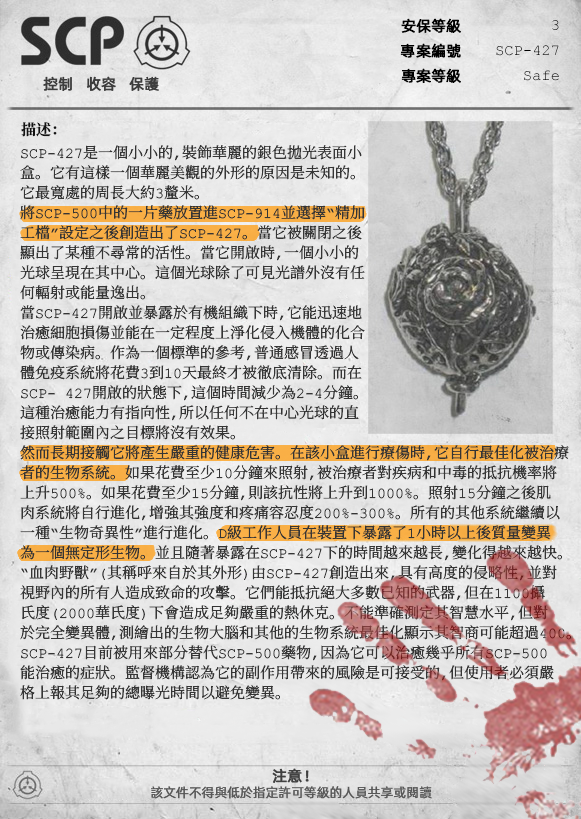
<style>
.page{position:relative;width:581px;height:819px}
.page>*{position:absolute;margin:0}
.t1{font:15px "AlibabaPuHuiTiR";color:#000000;font-weight:bold}
.t2{font:15px "AlibabaPuHuiTiR";color:#3d3d3d;font-weight:bold}
.t3{font:15px "ContainmentBreach-Bold";color:#121212}
.t4{font:15px/20px "ContainmentBreach-Regular";color:#353535}
.t5{font:15px "AlibabaPuHuiTiR";color:#414141;font-weight:bold}
.t6{font:13px "AlibabaPuHuiTiR";color:#575757}
</style>
<div class="page">
<p class="t1" style="left:401px;top:18px;width:60px;height:15px">安保等級</p>
<p class="t1" style="left:400px;top:43px;width:61px;height:15px">專案編號</p>
<p class="t2" style="left:43px;top:76px;width:116px;height:15px">控制   收容   保護</p>
<p class="t1" style="left:401px;top:68px;width:60px;height:15px">專案等級</p>
<p class="t3" style="left:21px;top:122px;width:36px;height:15px">描述：</p>
<p class="t4" style="left:20px;top:145px;width:551px;height:555px">SCP-427是一個小小的，裝飾華麗的銀色拋光表面小<br>盒。它有這樣一個華麗美觀的外形的原因是未知的。<br>它最寬處的周長大約3釐米。<br>將SCP-500中的一片藥放置進SCP-914並選擇“精加<br>工檔”設定之後創造出了SCP-427。當它被關閉之後<br>顯出了某種不尋常的活性。當它開啟時，一個小小的<br>光球呈現在其中心。這個光球除了可見光譜外沒有任<br>何輻射或能量逸出。<br>當SCP-427開啟並暴露於有機組織下時，它能迅速地<br>治癒細胞損傷並能在一定程度上淨化侵入機體的化合<br>物或傳染病。作為一個標準的參考，普通感冒透過人<br>體免疫系統將花費3到10天最終才被徹底清除。而在<br>SCP- 427開啟的狀態下，這個時間減少為2-4分鐘。<br>這種治癒能力有指向性，所以任何不在中心光球的直<br>接照射範圍內之目標將沒有效果。<br>然而長期接觸它將產生嚴重的健康危害。在該小盒進行療傷時，它自行最佳化被治療<br>者的生物系統。如果花費至少10分鐘來照射，被治療者對疾病和中毒的抵抗機率將<br>上升500%。如果花費至少15分鐘，則該抗性將上升到1000%。照射15分鐘之後肌<br>肉系統將自行進化，增強其強度和疼痛容忍度200%-300%。所有的其他系統繼續以<br>一種“生物奇異性”進行進化。D級工作人員在裝置下暴露了1小時以上後質量變異<br>為一個無定形生物。並且隨著暴露在SCP-427下的時間越來越長，變化得越來越快。<br>“血肉野獸”（其稱呼來自於其外形）由SCP-427創造出來，具有高度的侵略性，並對<br>視野內的所有人造成致命的攻擊。它們能抵抗絕大多數已知的武器，但在1100攝<br>氏度（2000華氏度）下會造成足夠嚴重的熱休克。不能準確測定其智慧水平，但對<br>於完全變異體，測繪出的生物大腦和其他的生物系統最佳化顯示其智商可能超過400。<br>SCP-427目前被用來部分替代SCP-500藥物，因為它可以治癒幾乎所有SCP-500<br>能治癒的症狀。監督機構認為它的副作用帶來的風險是可接受的，但使用者必須嚴<br>格上報其足夠的總曝光時間以避免變異。</p>
<p class="t5" style="left:272px;top:768px;width:37px;height:15px">注意！</p>
<p class="t6" style="left:151px;top:786px;width:281px;height:13px">該文件不得與低於指定許可等級的人員共享或閱讀</p>
</div>
